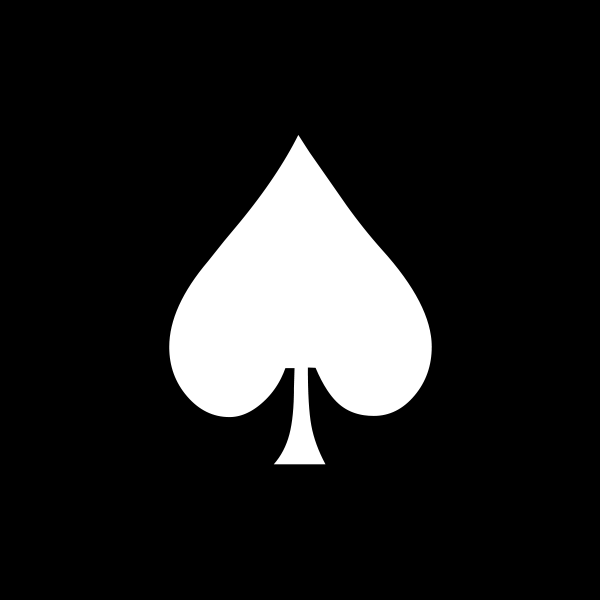
<style>
.page{position:relative;width:600px;height:600px;background:#000000}
.page>*{position:absolute;margin:0}
.t1{font:589.6px "AppleSymbols";color:#ffffff}
</style>
<div class="page">
<p class="t1" style="left:169px;top:135px;width:263px;height:330px">♠</p>
</div>
